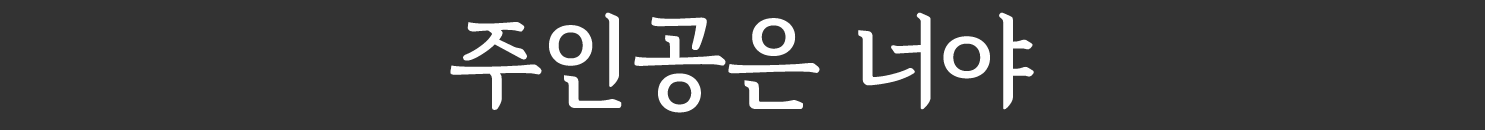
<style>
.page{position:relative;width:1485px;height:130px;background:#333333}
.page>*{position:absolute;margin:0}
.t1{font:100px "GyeonggiBatangB";color:#ffffff}
</style>
<div class="page">
<p class="t1" style="left:450px;top:12px;width:584px;height:101px">주인공은 너야</p>
</div>
